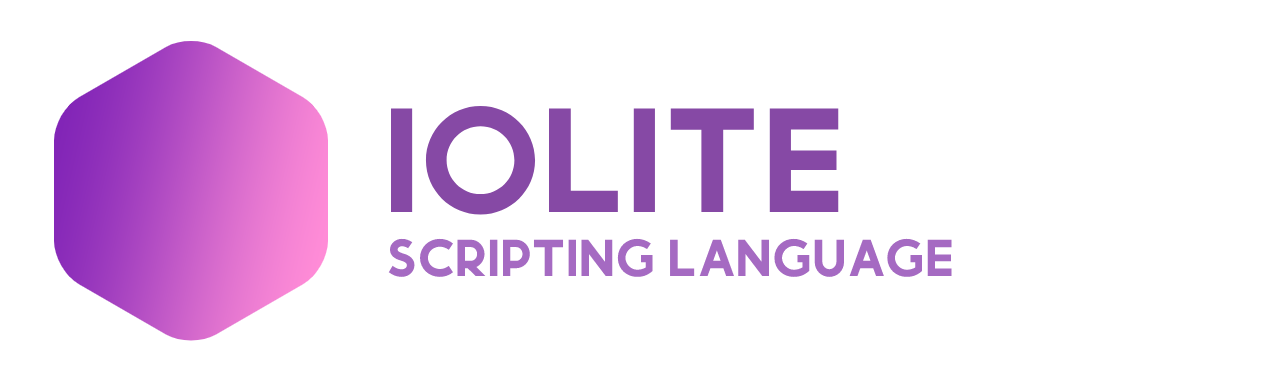
<style>
.page{position:relative;width:1280px;height:383px;background:#ffffff}
.page>*{position:absolute;margin:0}
.t1{font:200px "Momcake-Bold";color:#8649a5}
.t2{font:70px "Momcake-Bold";color:#a56ac2}
</style>
<div class="page">
<p class="t1" style="left:391px;top:105px;width:448px;height:110px">IOLITE</p>
<p class="t2" style="left:388px;top:238px;width:564px;height:39px">Scripting language</p>
</div>
